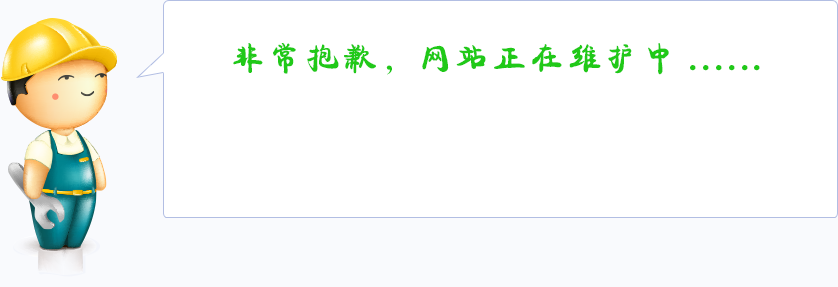
<style>
.page{position:relative;width:838px;height:287px;background:#ffffff}
.page>*{position:absolute;margin:0}
.t1{font:34px "FZKANGJW--GB1-0";letter-spacing:0.1em;color:#20c918}
</style>
<div class="page">
<p class="t1" style="left:233px;top:43px;width:527px;height:32px">非常抱歉，网站正在维护中......</p>
</div>
